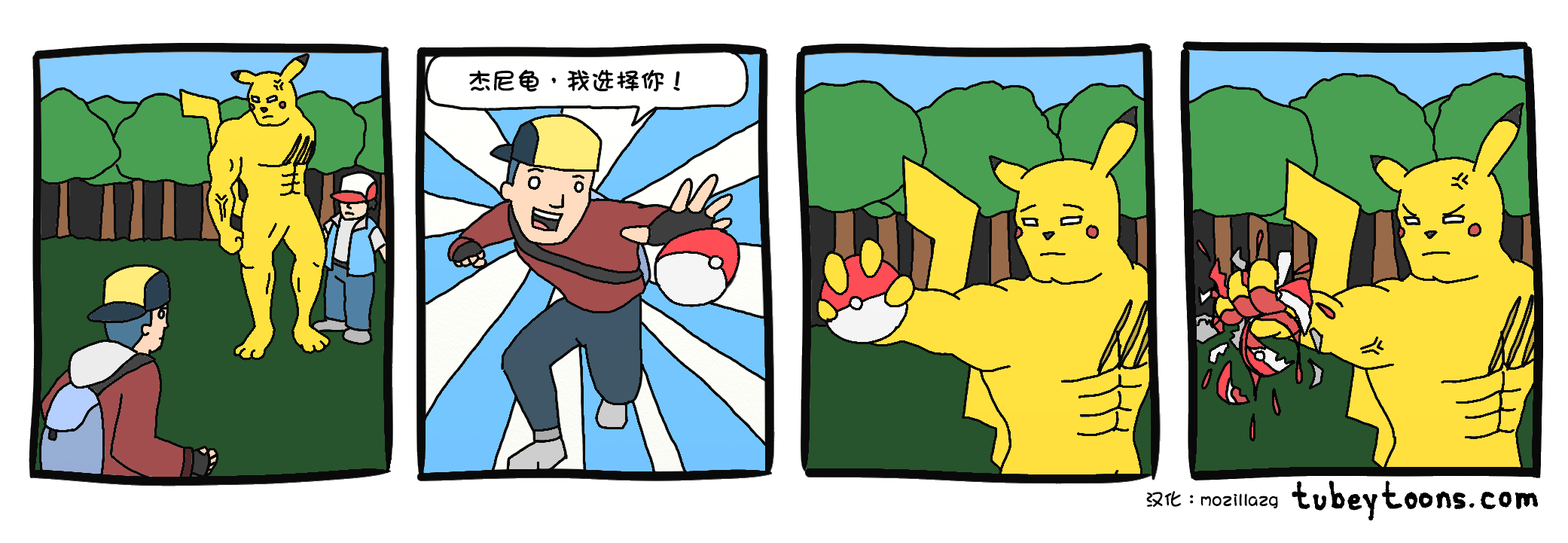
<style>
.page{position:relative;width:1568px;height:543px;background:#ffffff}
.page>*{position:absolute;margin:0}
.t1{font:24.1px "DFGirl";color:#000000;font-weight:bold}
.t2{font:18px "DFGirl";color:#000000;font-weight:bold}
</style>
<div class="page">
<p class="t1" style="left:469px;top:69px;width:211px;height:23px">杰尼龟，我选择你！</p>
<p class="t2" style="left:1146px;top:491px;width:132px;height:17px">汉化：mozillazg</p>
</div>
